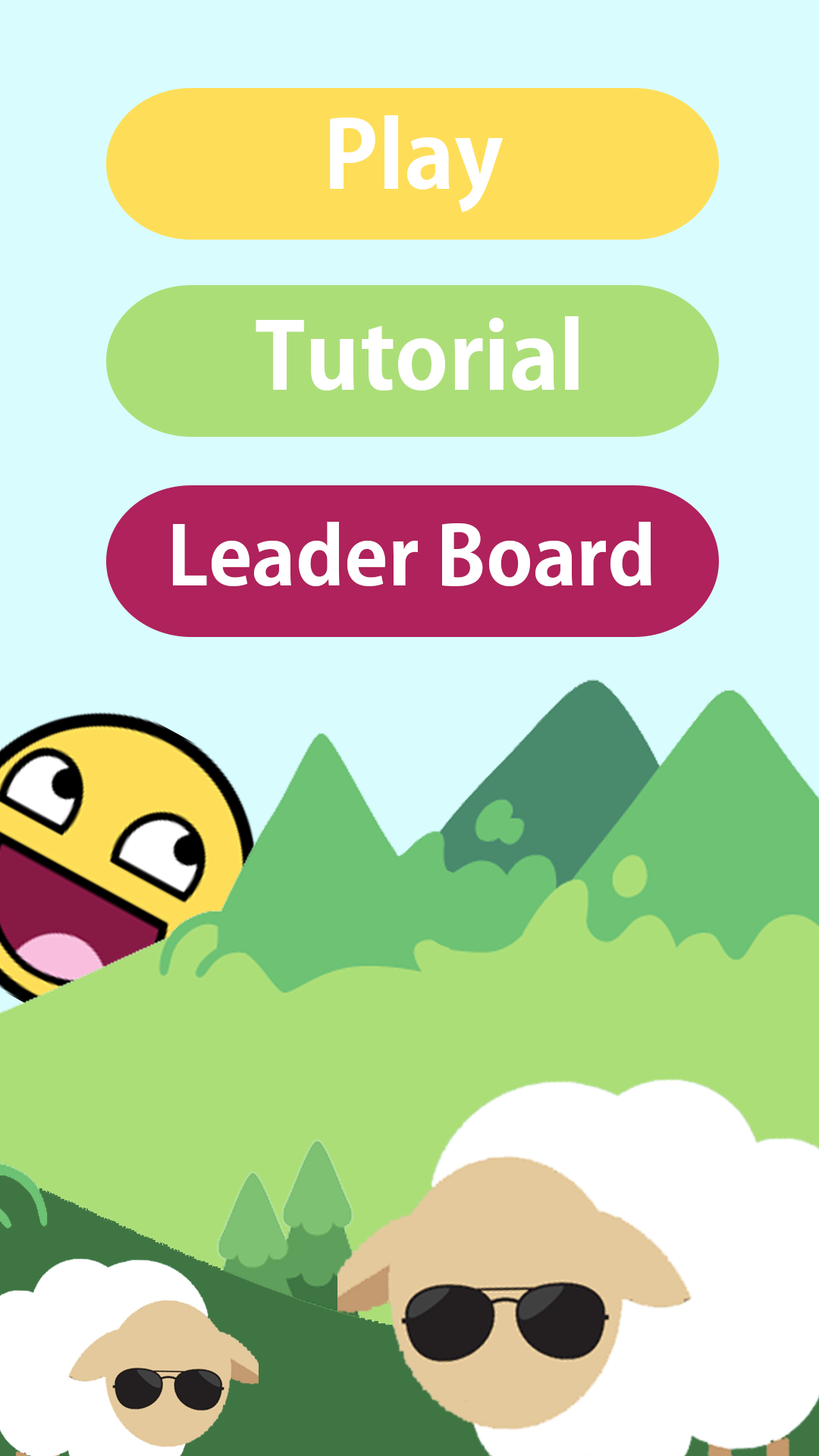
<style>
.page{position:relative;width:819px;height:1456px;background:#d9fcff}
.page>*{position:absolute;margin:0}
.t1{font:91.8px "AdobeGothicStd-Bold";color:#ffffff}
.t2{font:91.1px "AdobeGothicStd-Bold";color:#ffffff}
.t3{font:79.4px "AdobeGothicStd-Bold";color:#ffffff}
</style>
<div class="page">
<p class="t1" style="left:330px;top:115px;width:173px;height:97px">Play</p>
<p class="t2" style="left:256px;top:316px;width:323px;height:75px">Tutorial</p>
<p class="t3" style="left:173px;top:522px;width:478px;height:65px">Leader Board</p>
</div>
